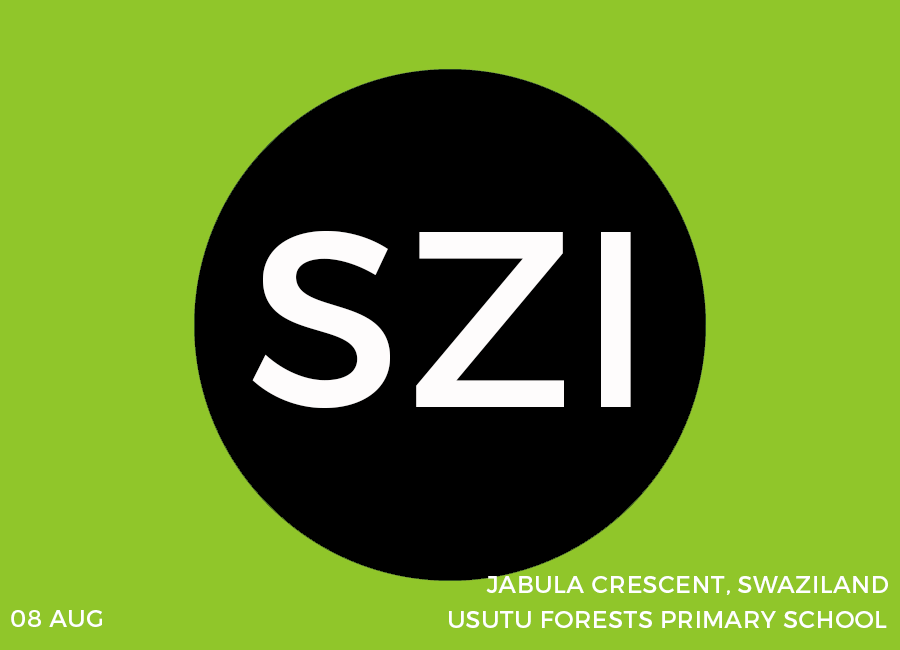
<style>
.page{position:relative;width:900px;height:650px;background:#90c62a}
.page>*{position:absolute;margin:0}
.t1{font:250px "Montserrat-Regular";letter-spacing:0.02em;color:#fefcfc}
.t2{font:24px "Montserrat-Regular";letter-spacing:0.02em;color:#ffffff}
</style>
<div class="page">
<p class="t1" style="left:252px;top:231px;width:379px;height:177px">SZI</p>
<p class="t2" style="left:486px;top:576px;width:402px;height:19px">JABULA CRESCENT, SWAZILAND</p>
<p class="t2" style="left:11px;top:610px;width:91px;height:17px">08 AUG</p>
<p class="t2" style="left:449px;top:611px;width:438px;height:17px">USUTU FORESTS PRIMARY SCHOOL</p>
</div>
